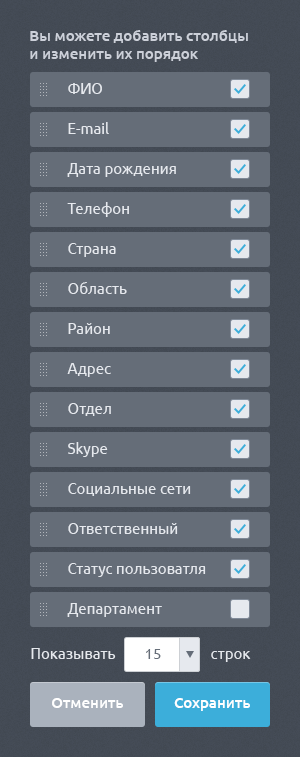
<style>
.page{position:relative;width:300px;height:757px;background:#656d78}
.page>*{position:absolute;margin:0}
.t1{font:15px "Ubuntu-Medium";color:#ccd0d9}
.t2{font:15px "Ubuntu";color:#e6e9ee}
.t3{font:15px "Ubuntu";color:#656d78}
.t4{font:15px "Ubuntu-Medium";color:#ffffff}
</style>
<div class="page">
<p class="t1" style="left:30px;top:30px;width:218px;height:32px">Вы можете добавить столбцы<br>и изменить их порядок</p>
<p class="t2" style="left:68px;top:83px;width:34px;height:11px">ФИО</p>
<p class="t2" style="left:68px;top:122px;width:41px;height:12px">E-mail</p>
<p class="t2" style="left:67px;top:163px;width:109px;height:14px">Дата рождения</p>
<p class="t2" style="left:67px;top:202px;width:62px;height:15px">Телефон</p>
<p class="t2" style="left:68px;top:243px;width:48px;height:14px">Страна</p>
<p class="t2" style="left:68px;top:282px;width:59px;height:12px">Область</p>
<p class="t2" style="left:68px;top:323px;width:42px;height:11px">Район</p>
<p class="t2" style="left:67px;top:363px;width:44px;height:14px">Адрес</p>
<p class="t2" style="left:68px;top:403px;width:43px;height:13px">Отдел</p>
<p class="t2" style="left:68px;top:442px;width:40px;height:15px">Skype</p>
<p class="t2" style="left:68px;top:483px;width:123px;height:13px">Социальные сети</p>
<p class="t2" style="left:68px;top:523px;width:110px;height:11px">Ответственный</p>
<p class="t2" style="left:68px;top:563px;width:138px;height:14px">Статус пользоватля</p>
<p class="t2" style="left:67px;top:603px;width:95px;height:14px">Департамент</p>
<p class="t2" style="left:31px;top:648px;width:85px;height:11px">Показывать</p>
<p class="t3" style="left:146px;top:649px;width:15px;height:10px">15</p>
<p class="t2" style="left:211px;top:651px;width:40px;height:11px">строк</p>
<p class="t4" style="left:52px;top:698px;width:71px;height:10px">Отменить</p>
<p class="t4" style="left:174px;top:698px;width:76px;height:13px">Сохранить</p>
</div>
